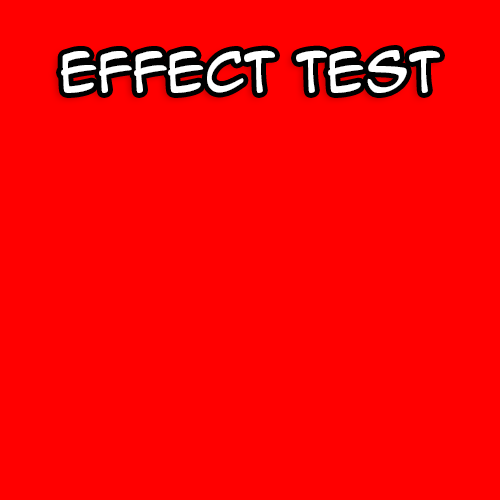
<style>
.page{position:relative;width:500px;height:500px;background:#ff0000}
.page>*{position:absolute;margin:0}
.t1{font:50px "AnimeAce2.0BB";color:#ffffff}
</style>
<div class="page">
<p class="t1" style="left:61px;top:50px;width:379px;height:43px">Effect Test</p>
</div>
